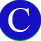
<style>
.page{position:relative;width:41px;height:41px;background:#180fc3}
.page>*{position:absolute;margin:0}
.t1{font:36px "TimesNewRomanPSMT";color:#fbfafa}
</style>
<div class="page">
<p class="t1" style="left:8px;top:8px;width:22px;height:24px">C</p>
</div>
